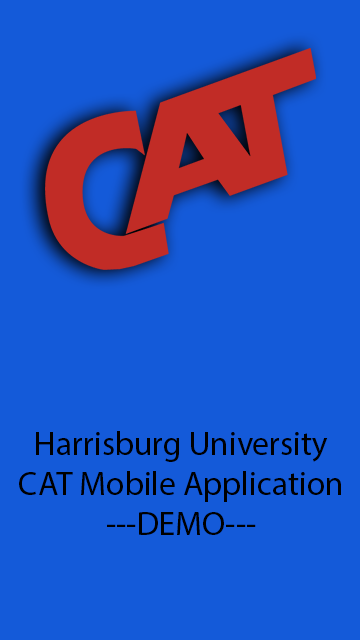
<style>
.page{position:relative;width:360px;height:640px;background:#145ad9}
.page>*{position:absolute;margin:0}
.t1{font:33.3px "MyriadPro-Regular";color:#000000}
</style>
<div class="page">
<p class="t1" style="left:19px;top:431px;width:322px;height:104px;text-align:center">Harrisburg University<br>CAT Mobile Application<br>---DEMO---</p>
</div>
